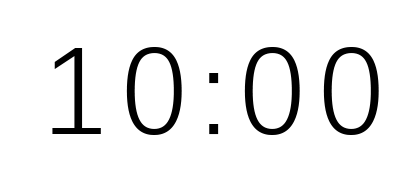
<style>
.page{position:relative;width:414px;height:187px;background:#ffffff}
.page>*{position:absolute;margin:0}
.t1{font:125px "DengXian";letter-spacing:0.1em;color:#000000}
</style>
<div class="page">
<p class="t1" style="left:52px;top:47px;width:327px;height:88px">10:00</p>
</div>
